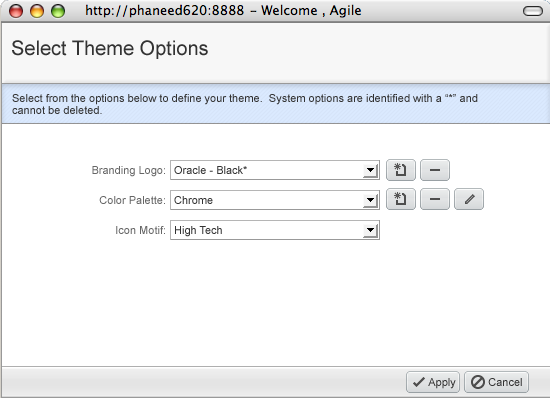
<style>
.page{position:relative;width:550px;height:398px;background:#ffffff}
.page>*{position:absolute;margin:0}
.t1{font:20px "ArialMT";color:#333333}
.t2{font:11px/12px "ArialMT";color:#333333}
.t3{font:11px "ArialMT";color:#666666}
.t4{font:11px "ArialMT";color:#333333}
</style>
<div class="page">
<p class="t1" style="left:12px;top:40px;width:196px;height:19px">Select Theme Options</p>
<p class="t2" style="left:12px;top:94px;width:466px;height:20px">Select from the options below to define your theme.  System options are identified with a “*” and <br>cannot be deleted.</p>
<p class="t3" style="left:92px;top:166px;width:73px;height:11px">Branding Logo:</p>
<p class="t4" style="left:174px;top:166px;width:73px;height:8px">Oracle - Black*</p>
<p class="t3" style="left:99px;top:196px;width:66px;height:8px">Color Palette:</p>
<p class="t4" style="left:174px;top:196px;width:39px;height:8px">Chrome</p>
<p class="t3" style="left:116px;top:226px;width:49px;height:8px">Icon Motif:</p>
<p class="t4" style="left:175px;top:226px;width:47px;height:11px">High Tech</p>
<p class="t4" style="left:428px;top:378px;width:28px;height:11px">Apply</p>
<p class="t4" style="left:488px;top:378px;width:34px;height:8px">Cancel</p>
</div>
